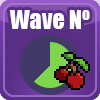
<style>
.page{position:relative;width:100px;height:100px}
.page>*{position:absolute;margin:0}
.t1{font:24px "Impact";color:#ffffff}
</style>
<div class="page">
<p class="t1" style="left:9px;top:10px;width:81px;height:19px">Wave Nº</p>
</div>
